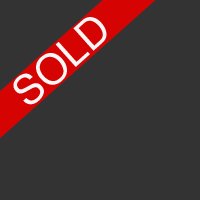
<style>
.page{position:relative;width:200px;height:200px;background:#333333}
.page>*{position:absolute;margin:0}
.t1{font:41.7px "Helvetica";color:#faf6f6}
</style>
<div class="page">
<p class="t1" style="left:13px;top:17px;width:94px;height:88px;rotate:-42deg">SOLD</p>
</div>
